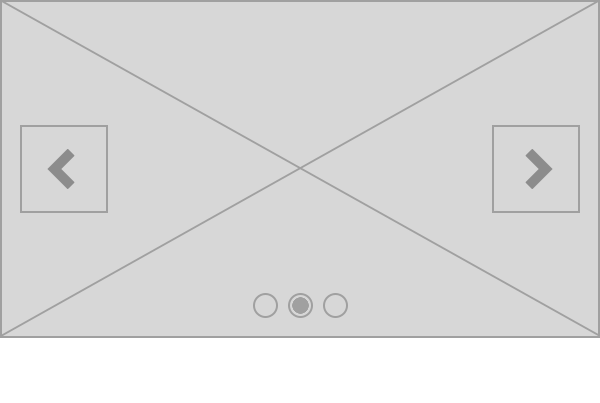
<style>
.page{position:relative;width:600px;height:403px;background:#d7d7d7}
.page>*{position:absolute;margin:0}
.t1{font:40px "SSStandard";color:#8c8c8c;text-transform:uppercase}
</style>
<div class="page">
<p class="t1" style="left:47px;top:149px;width:28px;height:40px">navigateleft</p>
<p class="t1" style="left:525px;top:149px;width:28px;height:40px">navigateright</p>
</div>
